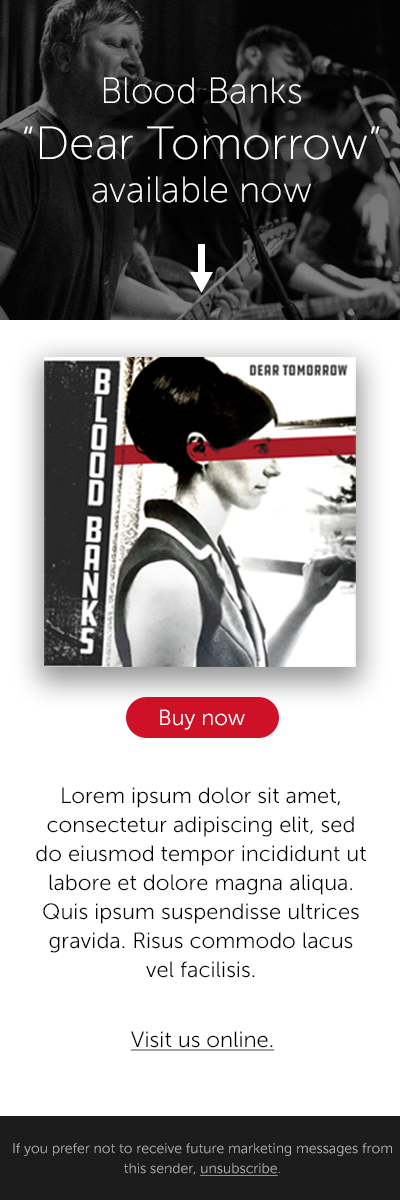
<style>
.page{position:relative;width:400px;height:1200px;background:#ffffff}
.page>*{position:absolute;margin:0}
.t1{font:46.3px "MuseoSans-100";color:#ffffff}
.t2{font:36.3px "MuseoSans-100";color:#ffffff}
.t3{font:21.8px "MuseoSans-300";color:#ffffff}
.t4{font:22px/29px "MuseoSans-300";color:#000000}
.t5{font:22px "MuseoSans-300";color:#000000;text-decoration:underline}
.t6{font:14px/28px "MuseoSans-300";color:#aeadad}
.t7{font:14px/20px "MuseoSans-300";color:#aeadad}
.t8{font:14px/20px "MuseoSans-300";color:#aeadad;text-decoration:underline}
</style>
<div class="page">
<p class="t1" style="left:23px;top:77px;width:357px;height:126px;text-align:center"><span class="t2">Blood Banks<br></span>“Dear Tomorrow”<br><span class="t2">available now</span></p>
<p class="t3" style="left:160px;top:709px;width:85px;height:21px">Buy now</p>
<p class="t4" style="left:36px;top:787px;width:330px;height:191px;text-align:center">Lorem ipsum dolor sit amet, consectetur adipiscing elit, sed do eiusmod tempor incididunt ut labore et dolore magna aliqua. Quis ipsum suspendisse ultrices gravida. Risus commodo lacus vel facilisis.</p>
<p class="t5" style="left:130px;top:1031px;width:145px;height:20px">Visit us online.</p>
<p class="t6" style="left:13px;top:1143px;width:379px;height:33px;text-align:center">If you prefer not to receive future marketing messages from<br><span class="t7">this sender, </span><span class="t8">unsubscribe</span><span class="t7">.</span></p>
</div>
